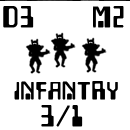
<style>
.page{position:relative;width:130px;height:130px;background:#ffffff}
.page>*{position:absolute;margin:0}
.t1{font:25px "Checkbook";letter-spacing:0.06em;color:#000000;font-weight:bold}
.t2{font:20.8px "Checkbook";letter-spacing:0.06em;color:#000000;font-weight:bold}
</style>
<div class="page">
<p class="t1" style="left:3px;top:5px;width:31px;height:22px">D3</p>
<p class="t1" style="left:93px;top:5px;width:31px;height:22px">M2</p>
<p class="t2" style="left:14px;top:80px;width:104px;height:19px">INFANTRY</p>
<p class="t1" style="left:41px;top:104px;width:42px;height:22px">3/1</p>
</div>
